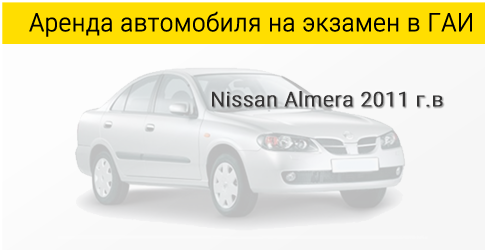
<style>
.page{position:relative;width:485px;height:250px}
.page>*{position:absolute;margin:0}
.t1{font:25.2px "RobotoCondensed-Light";letter-spacing:-0.025em;color:#000000;font-weight:bold;scale:1.13 1}
.t2{font:20.2px "RobotoCondensed-Light";color:#363535;font-weight:bold;scale:1.19 1}
</style>
<div class="page">
<p class="t1" style="left:29px;top:11px;width:443px;height:26px">Аренда автомобиля на экзамен в ГАИ</p>
<p class="t2" style="left:212px;top:91px;width:231px;height:16px">Nissan Almera 2011 г.в</p>
</div>
